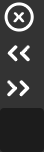
<style>
.page{position:relative;width:44px;height:152px;background:#333333}
.page>*{position:absolute;margin:0}
.t1{font:18.5px "ArialRoundedMTBold";color:#ffffff;scale:1.21 1}
</style>
<div class="page">
<p class="t1" style="left:13px;top:12px;width:12px;height:11px">x</p>
</div>
